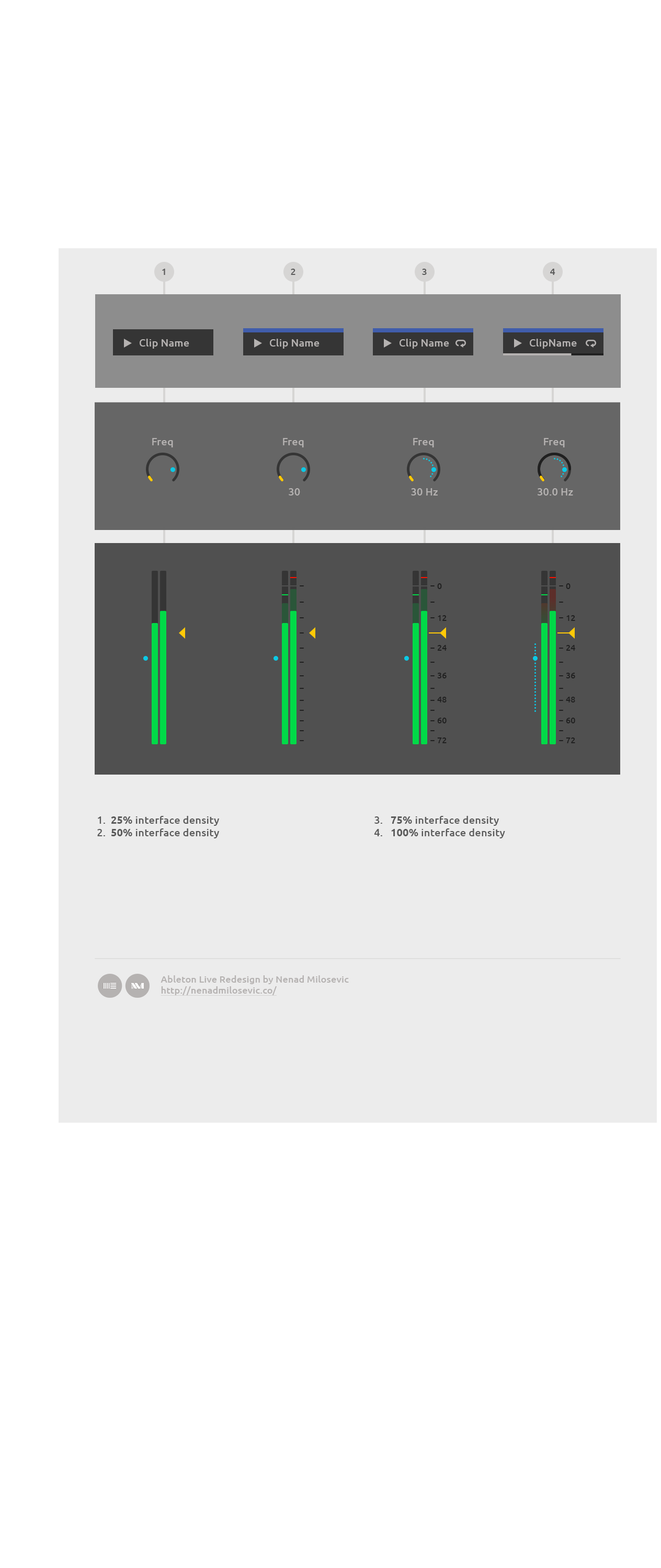
<style>
.page{position:relative;width:661px;height:1568px;background:#ffffff}
.page>*{position:absolute;margin:0}
.t1{font:9.4px "Ubuntu-Medium";letter-spacing:0.01em;color:#5a5a5a;text-transform:uppercase}
.t2{font:10.5px "Ubuntu-Medium";letter-spacing:0.01em;color:#b5b2b1}
.t3{font:8.4px "Ubuntu-Medium";letter-spacing:0.01em;color:#202020}
.t4{font:10.5px "Ubuntu-Medium";letter-spacing:0.01em;color:#5a5a5a}
.t5{font:10.5px "Ubuntu-Bold";letter-spacing:0.01em;color:#5a5a5a}
.t6{font:9.4px "Ubuntu-Medium";letter-spacing:0.01em;color:#b5b2b1}
.t7{font:9.4px "Ubuntu-Medium";letter-spacing:0.01em;color:#b5b2b1;text-decoration:underline}
</style>
<div class="page">
<p class="t1" style="left:162px;top:269px;width:3px;height:6px">1</p>
<p class="t1" style="left:291px;top:269px;width:4px;height:6px">2</p>
<p class="t1" style="left:422px;top:269px;width:4px;height:6px">3</p>
<p class="t1" style="left:550px;top:269px;width:5px;height:6px">4</p>
<p class="t2" style="left:140px;top:339px;width:49px;height:10px">Clip Name</p>
<p class="t2" style="left:270px;top:339px;width:49px;height:10px">Clip Name</p>
<p class="t2" style="left:399px;top:339px;width:50px;height:10px">Clip Name</p>
<p class="t2" style="left:529px;top:339px;width:48px;height:10px">ClipName</p>
<p class="t2" style="left:152px;top:438px;width:21px;height:9px">Freq</p>
<p class="t2" style="left:283px;top:438px;width:21px;height:9px">Freq</p>
<p class="t2" style="left:413px;top:438px;width:21px;height:9px">Freq</p>
<p class="t2" style="left:544px;top:438px;width:20px;height:9px">Freq</p>
<p class="t2" style="left:289px;top:488px;width:11px;height:7px">30</p>
<p class="t2" style="left:411px;top:488px;width:26px;height:7px">30 Hz</p>
<p class="t2" style="left:537px;top:488px;width:36px;height:7px">30.0 Hz</p>
<p class="t3" style="left:437px;top:583px;width:5px;height:6px">0</p>
<p class="t3" style="left:566px;top:583px;width:4px;height:6px">0</p>
<p class="t3" style="left:437px;top:615px;width:9px;height:6px">12</p>
<p class="t3" style="left:566px;top:615px;width:9px;height:6px">12</p>
<p class="t3" style="left:437px;top:645px;width:9px;height:6px">24</p>
<p class="t3" style="left:566px;top:645px;width:9px;height:6px">24</p>
<p class="t3" style="left:437px;top:673px;width:9px;height:5px">36</p>
<p class="t3" style="left:566px;top:673px;width:9px;height:5px">36</p>
<p class="t3" style="left:437px;top:697px;width:9px;height:5px">48</p>
<p class="t3" style="left:566px;top:697px;width:9px;height:5px">48</p>
<p class="t3" style="left:437px;top:718px;width:9px;height:5px">60</p>
<p class="t3" style="left:566px;top:718px;width:9px;height:5px">60</p>
<p class="t3" style="left:437px;top:737px;width:9px;height:6px">72</p>
<p class="t3" style="left:566px;top:737px;width:9px;height:6px">72</p>
<p class="t4" style="left:97px;top:816px;width:8px;height:20px;text-align:right">1.<br>2.</p>
<p class="t4" style="left:111px;top:816px;width:108px;height:22px"><span class="t5">25%</span> interface density<br><span class="t5">50%</span> interface density</p>
<p class="t4" style="left:374px;top:816px;width:8px;height:20px;text-align:right">3.<br>4.</p>
<p class="t4" style="left:390px;top:816px;width:115px;height:22px"><span class="t5">75%</span> interface density<br><span class="t5">100%</span> interface density</p>
<p class="t6" style="left:160px;top:975px;width:189px;height:21px">Ableton Live Redesign by Nenad Milosevic<br><span class="t7">http://nenadmilosevic.co/</span></p>
</div>
